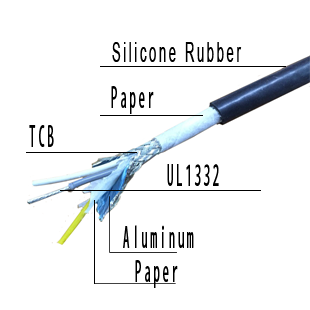
<style>
.page{position:relative;width:310px;height:310px;background:#ffffff}
.page>*{position:absolute;margin:0}
.t1{font:28px "ArialMT";letter-spacing:0.2em;color:#000000;scale:0.47 1}
.t2{font:28px "AdobeFanHeitiStd-Bold";letter-spacing:0.2em;color:#000000;scale:0.47 1}
</style>
<div class="page">
<p class="t1" style="left:112px;top:42px;width:130px;height:20px">Silicone Rubber</p>
<p class="t2" style="left:111px;top:86px;width:43px;height:28px">Paper</p>
<p class="t2" style="left:29px;top:125px;width:25px;height:22px">TCB</p>
<p class="t2" style="left:167px;top:164px;width:52px;height:22px">UL1332</p>
<p class="t2" style="left:123px;top:225px;width:71px;height:23px">Aluminum</p>
<p class="t2" style="left:135px;top:260px;width:43px;height:28px">Paper</p>
</div>
